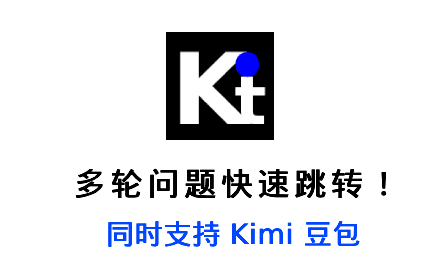
<style>
.page{position:relative;width:440px;height:280px;background:#ffffff}
.page>*{position:absolute;margin:0}
.t1{font:32px "DroidSansFallback";letter-spacing:0.12em;color:#000000;font-weight:bold}
.t2{font:28px "DroidSansFallback";color:#0045ff;font-weight:bold}
.t3{font:28px "DejaVuSans";color:#0045ff;font-weight:bold}
</style>
<div class="page">
<p class="t1" style="left:75px;top:168px;width:312px;height:31px">多轮问题快速跳转！</p>
<p class="t2" style="left:108px;top:221px;width:252px;height:26px">同时支持 <span class="t3">Kimi </span>豆包</p>
</div>
